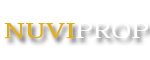
<style>
.page{position:relative;width:150px;height:60px;background:#ffffff}
.page>*{position:absolute;margin:0}
.t1{font:20px "AdobeKaitiStd-Regular";color:#dfa508;font-weight:bold;scale:1.44 1}
.t2{font:20px "AdobeKaitiStd-Regular";color:#ffffff;scale:1.44 1}
</style>
<div class="page">
<p class="t1" style="left:4px;top:23px;width:144px;height:16px;opacity:0.9">NUVI<span class="t2">PROP</span></p>
</div>
